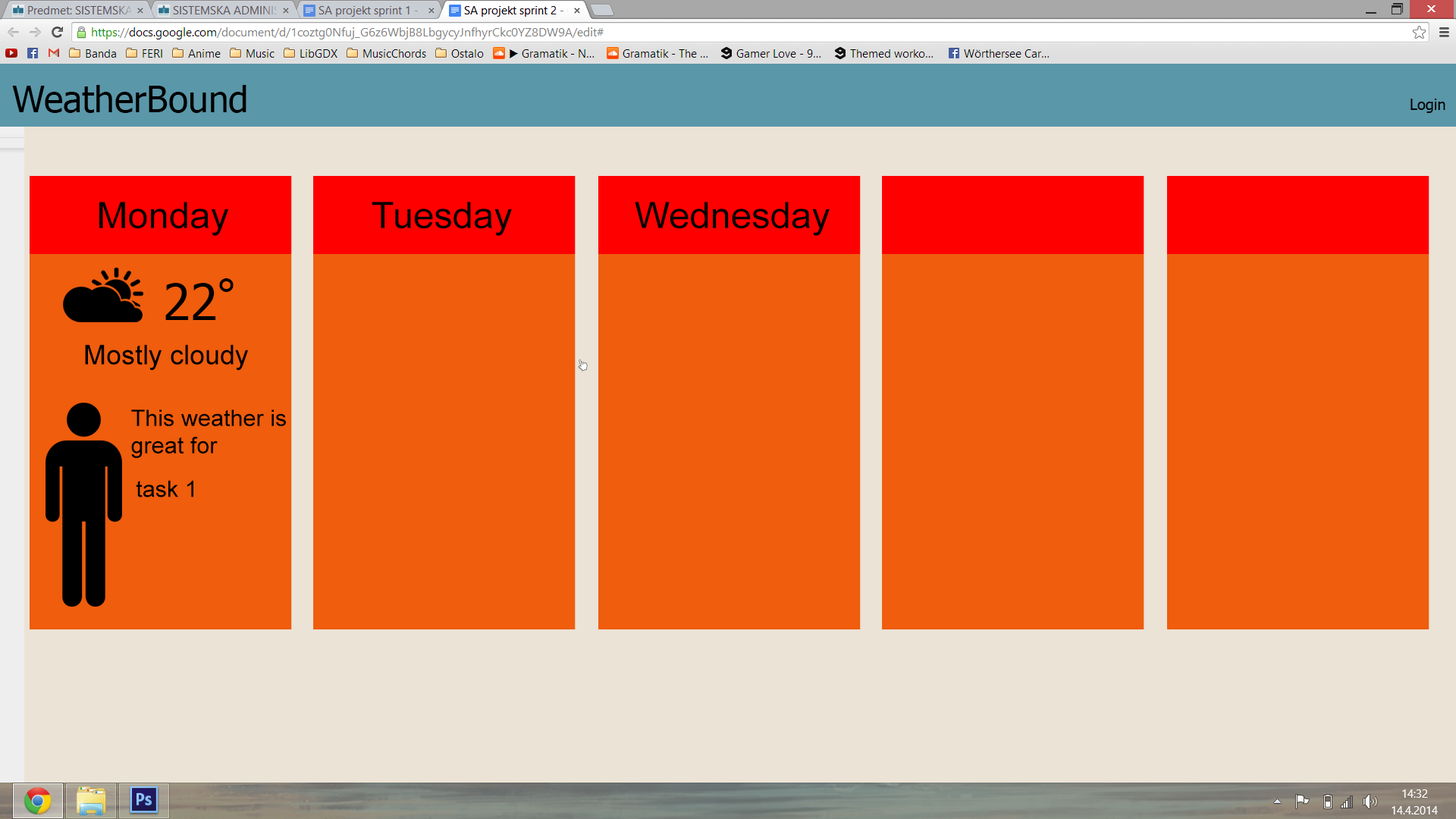
<style>
.page{position:relative;width:1456px;height:819px;background:#ef5d0d}
.page>*{position:absolute;margin:0}
.t1{font:36.4px "Tahoma";color:#000000}
.t2{font:15.2px "Tahoma";color:#000000}
.t3{font:36.4px "ArialMT";color:#000000}
.t4{font:37.5px "Tahoma";color:#000000}
.t5{font:50px "Tahoma";color:#000000}
.t6{font:27.3px "ArialMT";color:#000000}
.t7{font:22.7px "ArialMT";color:#000000}
</style>
<div class="page">
<p class="t1" style="left:12px;top:85px;width:234px;height:28px">WeatherBound</p>
<p class="t2" style="left:1410px;top:99px;width:35px;height:14px">Login</p>
<p class="t3" style="left:99px;top:202px;width:130px;height:34px">Monday</p>
<p class="t3" style="left:372px;top:202px;width:140px;height:34px">Tuesday</p>
<p class="t3" style="left:635px;top:202px;width:195px;height:34px">Wednesday</p>
<p class="t4" style="left:219px;top:278px;width:15px;height:14px">°</p>
<p class="t5" style="left:165px;top:283px;width:51px;height:37px">22</p>
<p class="t6" style="left:85px;top:344px;width:164px;height:26px">Mostly cloudy</p>
<p class="t7" style="left:131px;top:409px;width:155px;height:49px;text-align:right">This weather is<br> great for</p>
<p class="t7" style="left:136px;top:480px;width:57px;height:17px;text-align:right">task 1<br><br>ta</p>
</div>
